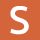
<style>
.page{position:relative;width:40px;height:40px;background:#d46439}
.page>*{position:absolute;margin:0}
.t1{font:40.3px "SukhumvitSet-SemiBold";color:#ffffff}
</style>
<div class="page">
<p class="t1" style="left:10px;top:6px;width:19px;height:29px">S</p>
</div>
